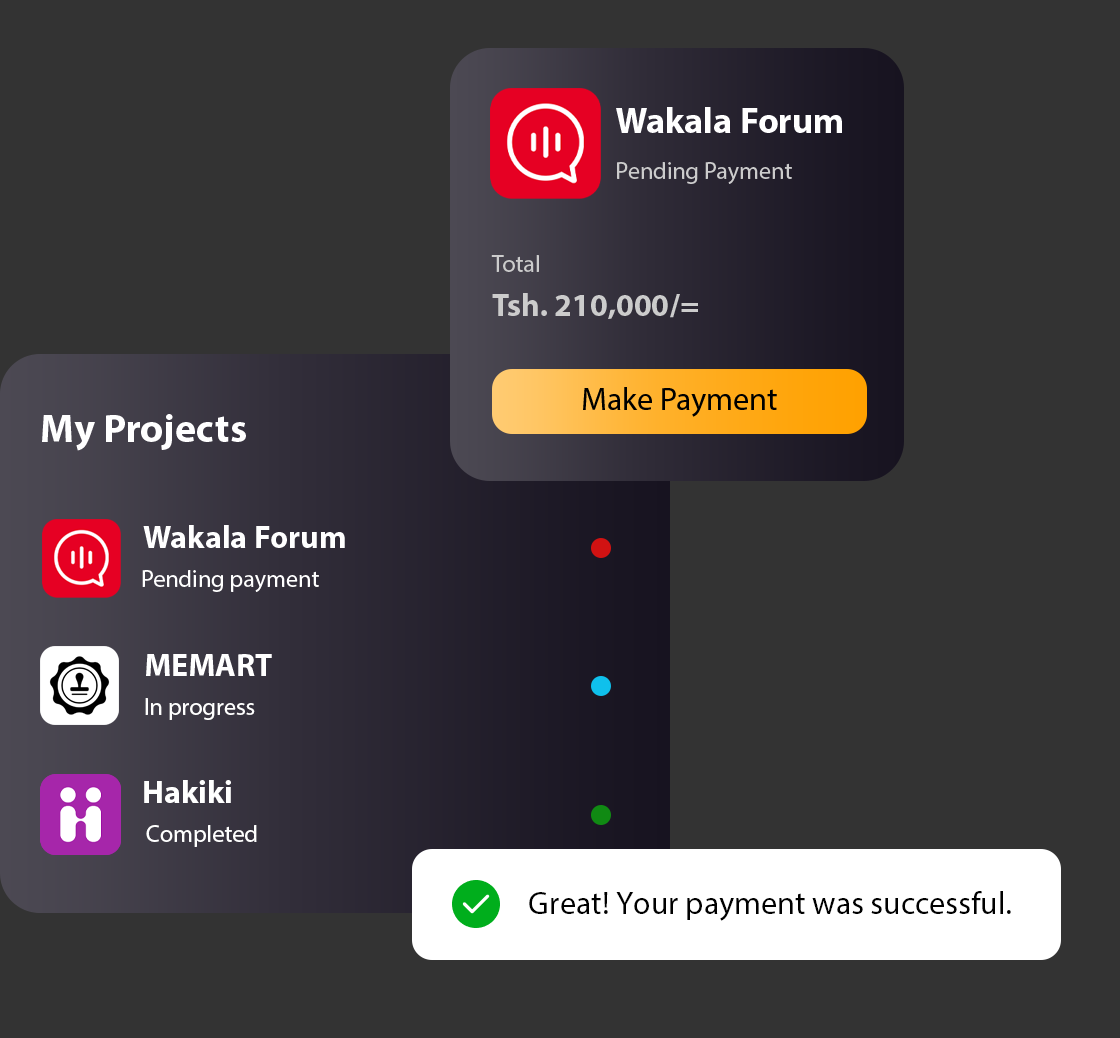
<style>
.page{position:relative;width:1120px;height:1038px;background:#333333}
.page>*{position:absolute;margin:0}
.t1{font:36px "MyriadPro-Bold";color:#ffffff}
.t2{font:24px "MyriadPro-Regular";color:#cccccc}
.t3{font:32px "MyriadPro-Bold";color:#cccccc}
.t4{font:32px "MyriadPro-Regular";color:#000000}
.t5{font:40px "MyriadPro-Bold";color:#ffffff}
.t6{font:32px "MyriadPro-Bold";color:#ffffff}
.t7{font:24px "MyriadPro-Regular";color:#ffffff}
</style>
<div class="page">
<p class="t1" style="left:616px;top:107px;width:226px;height:26px">Wakala Forum</p>
<p class="t2" style="left:617px;top:162px;width:175px;height:22px">Pending Payment</p>
<p class="t2" style="left:491px;top:255px;width:48px;height:17px">Total</p>
<p class="t3" style="left:492px;top:293px;width:206px;height:26px">Tsh. 210,000/=</p>
<p class="t4" style="left:583px;top:387px;width:194px;height:30px">Make Payment</p>
<p class="t5" style="left:42px;top:414px;width:204px;height:37px">My Projects</p>
<p class="t6" style="left:143px;top:525px;width:202px;height:23px">Wakala Forum</p>
<p class="t7" style="left:142px;top:570px;width:177px;height:22px">Pending payment</p>
<p class="t6" style="left:146px;top:654px;width:126px;height:22px">MEMART</p>
<p class="t7" style="left:145px;top:698px;width:110px;height:22px">In progress</p>
<p class="t6" style="left:144px;top:780px;width:87px;height:23px">Hakiki</p>
<p class="t7" style="left:146px;top:825px;width:111px;height:22px">Completed</p>
<p class="t4" style="left:529px;top:891px;width:482px;height:30px">Great! Your payment was successful.</p>
</div>
